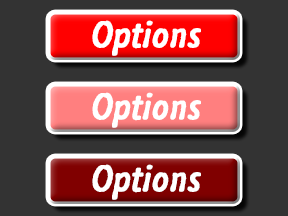
<style>
.page{position:relative;width:288px;height:216px;background:#333333}
.page>*{position:absolute;margin:0}
.t1{font:36.8px "SegoeMarker";color:#ffffff;font-weight:bold;font-style:italic}
</style>
<div class="page">
<p class="t1" style="left:92px;top:20px;width:109px;height:36px">Options</p>
</div>
